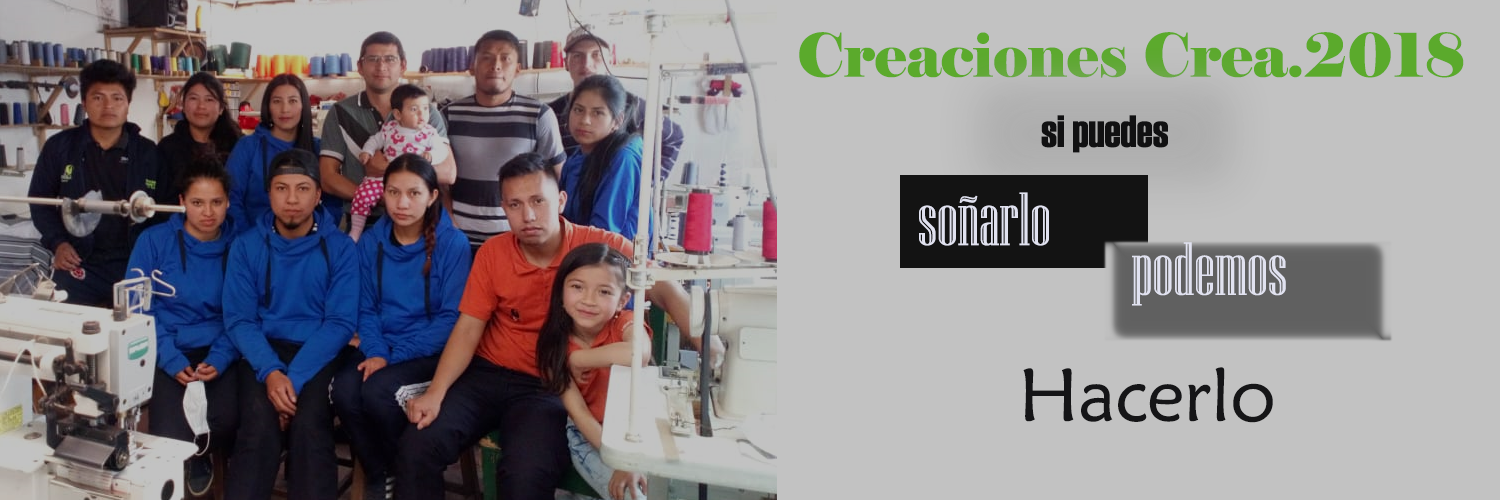
<style>
.page{position:relative;width:1500px;height:500px;background:#c2c2c2}
.page>*{position:absolute;margin:0}
.t1{font:60px "Elephant-Regular";color:#5baa2c}
.t2{font:45px "Haettenschweiler";color:#111112}
.t3{font:75px "NiagaraEngraved-Reg";color:#e1e2f0}
.t4{font:75px "MaiandraGD-Regular";color:#151517}
</style>
<div class="page">
<p class="t1" style="left:799px;top:32px;width:665px;height:46px">Creaciones Crea.2018</p>
<p class="t2" style="left:1041px;top:115px;width:127px;height:38px">si puedes</p>
<p class="t3" style="left:919px;top:192px;width:130px;height:54px">soñarlo</p>
<p class="t3" style="left:1132px;top:242px;width:154px;height:64px">podemos</p>
<p class="t4" style="left:1023px;top:367px;width:250px;height:56px">Hacerlo</p>
</div>
